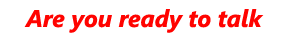
<style>
.page{position:relative;width:288px;height:44px;background:#ffffff}
.page>*{position:absolute;margin:0}
.t1{font:24px "SegoeUI-BoldItalic";color:#ff0300}
</style>
<div class="page">
<p class="t1" style="left:24px;top:9px;width:240px;height:24px">Are you ready to talk</p>
</div>
